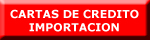
<style>
.page{position:relative;width:150px;height:40px;background:#ff0000}
.page>*{position:absolute;margin:0}
.t1{font:11px "Verdana-Bold";color:#ffffff}
</style>
<div class="page">
<p class="t1" style="left:10px;top:9px;width:129px;height:23px">CARTAS DE CREDITO<br>     IMPORTACION</p>
</div>
